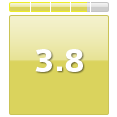
<style>
.page{position:relative;width:117px;height:117px;background:#dad35d}
.page>*{position:absolute;margin:0}
.t1{font:36px "Colaborate-Bold";color:#ffffff;text-transform:uppercase}
</style>
<div class="page">
<p class="t1" style="left:35px;top:49px;width:48px;height:23px">3.8</p>
</div>
